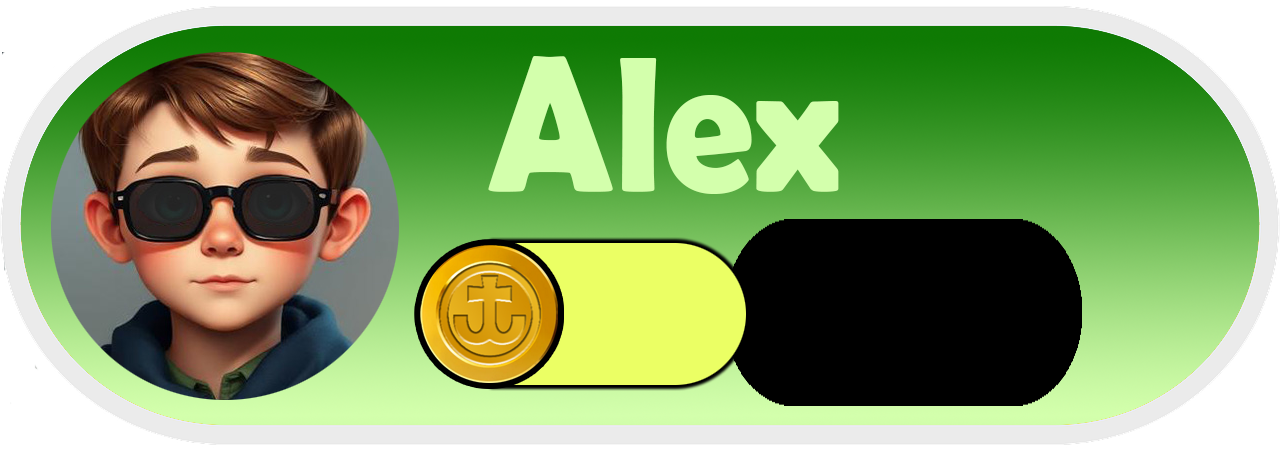
<style>
.page{position:relative;width:1280px;height:450px}
.page>*{position:absolute;margin:0}
.t1{font:193.7px "BerlinSansFBDemi-Bold";color:#d3ffac;scale:0.94 1}
</style>
<div class="page">
<p class="t1" style="left:488px;top:56px;width:351px;height:138px">Alex</p>
</div>
